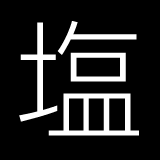
<style>
.page{position:relative;width:160px;height:160px;background:#000000}
.page>*{position:absolute;margin:0}
.t1{font:130px "FMotoyaCedar-W1-90msp-RKSJ-H";color:#ffffff}
</style>
<div class="page">
<p class="t1" style="left:19px;top:21px;width:120px;height:115px">塩</p>
</div>
